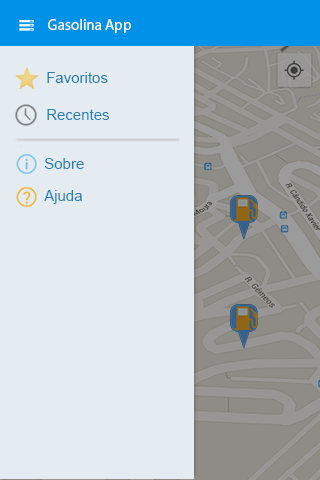
<style>
.page{position:relative;width:320px;height:480px;background:#e5ecf1}
.page>*{position:absolute;margin:0}
.t1{font:15px "MyriadPro-Regular";color:#fefefe}
.t2{font:15px "ArialMT";color:#2780b7}
</style>
<div class="page">
<p class="t1" style="left:48px;top:19px;width:83px;height:14px">Gasolina App</p>
<p class="t2" style="left:47px;top:72px;width:61px;height:11px">Favoritos</p>
<p class="t2" style="left:47px;top:109px;width:63px;height:11px">Recentes</p>
<p class="t2" style="left:44px;top:158px;width:40px;height:11px">Sobre</p>
<p class="t2" style="left:44px;top:190px;width:38px;height:14px">Ajuda</p>
</div>
